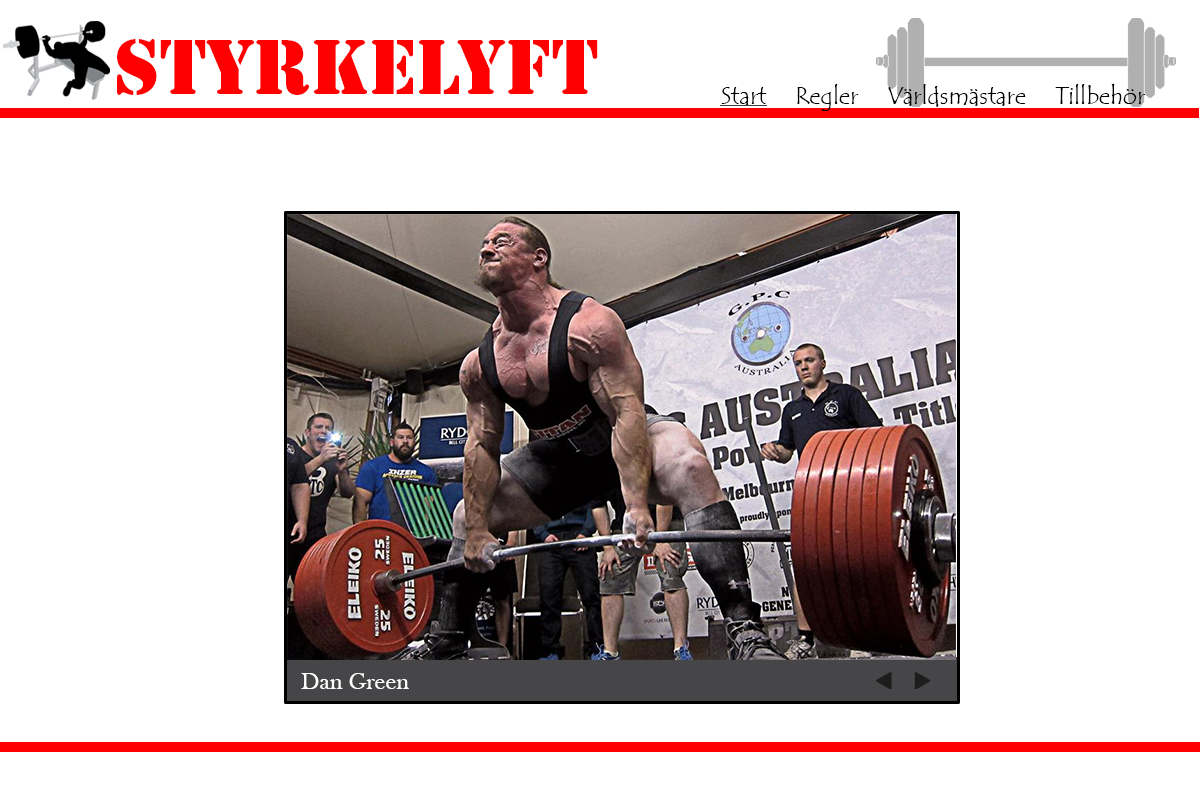
<style>
.page{position:relative;width:1200px;height:800px;background:#ffffff}
.page>*{position:absolute;margin:0}
.t1{font:72px "StencilStd";color:#fe0000}
.t2{font:24px "TempusSansITC";color:#000000}
.t3{font:24px "BaskOldFace";color:#ffffff}
</style>
<div class="page">
<p class="t1" style="left:117px;top:39px;width:481px;height:56px">Styrkelyft</p>
<p class="t2" style="left:721px;top:87px;width:46px;height:19px">Start</p>
<p class="t2" style="left:797px;top:84px;width:62px;height:27px">Regler</p>
<p class="t2" style="left:888px;top:84px;width:138px;height:23px">Världsmästare</p>
<p class="t2" style="left:1055px;top:83px;width:91px;height:21px">Tillbehör</p>
<p class="t3" style="left:301px;top:673px;width:108px;height:16px">Dan Green</p>
</div>
